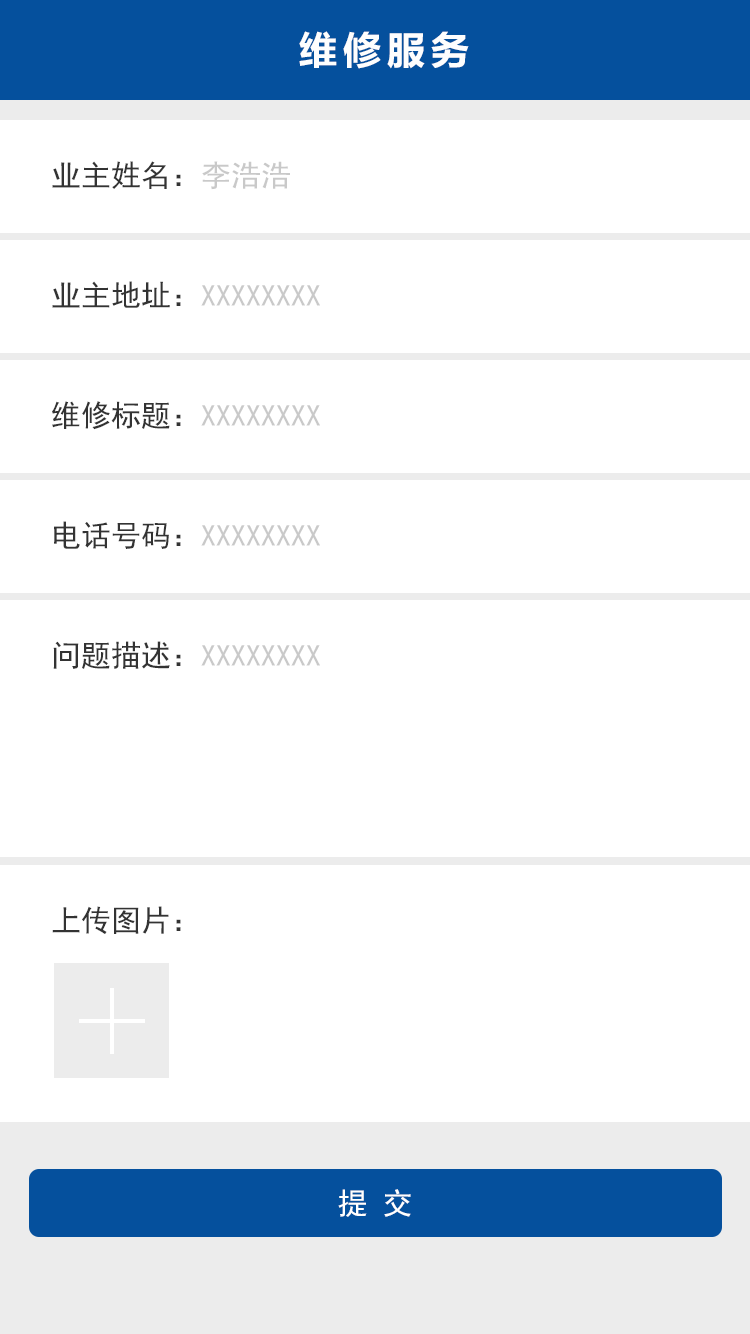
<style>
.page{position:relative;width:750px;height:1334px;background:#ffffff}
.page>*{position:absolute;margin:0}
.t1{font:40px "FZLTCHJW--GB1-0";letter-spacing:0.1em;color:#fefefe;text-transform:uppercase}
.t2{font:30px "SimHei";color:#333333;text-transform:uppercase}
.t3{font:30px "SimHei";color:#c9c9c9;text-transform:uppercase}
.t4{font:30px "SimHei";letter-spacing:0.5em;color:#ffffff;text-transform:uppercase}
</style>
<div class="page">
<p class="t1" style="left:299px;top:31px;width:170px;height:38px">维修服务</p>
<p class="t2" style="left:52px;top:161px;width:238px;height:29px">业主姓名：<span class="t3">李浩浩</span></p>
<p class="t3" style="left:52px;top:281px;width:268px;height:27px"><span class="t2">业主地址：</span>XXXXXXXX</p>
<p class="t3" style="left:52px;top:401px;width:268px;height:29px"><span class="t2">维修标题：</span>XXXXXXXX</p>
<p class="t3" style="left:54px;top:521px;width:266px;height:28px"><span class="t2">电话号码：</span>XXXXXXXX</p>
<p class="t3" style="left:53px;top:641px;width:267px;height:28px"><span class="t2">问题描述：</span>XXXXXXXX</p>
<p class="t2" style="left:52px;top:906px;width:129px;height:28px">上传图片：</p>
<p class="t4" style="left:338px;top:1189px;width:73px;height:28px">提交</p>
</div>
